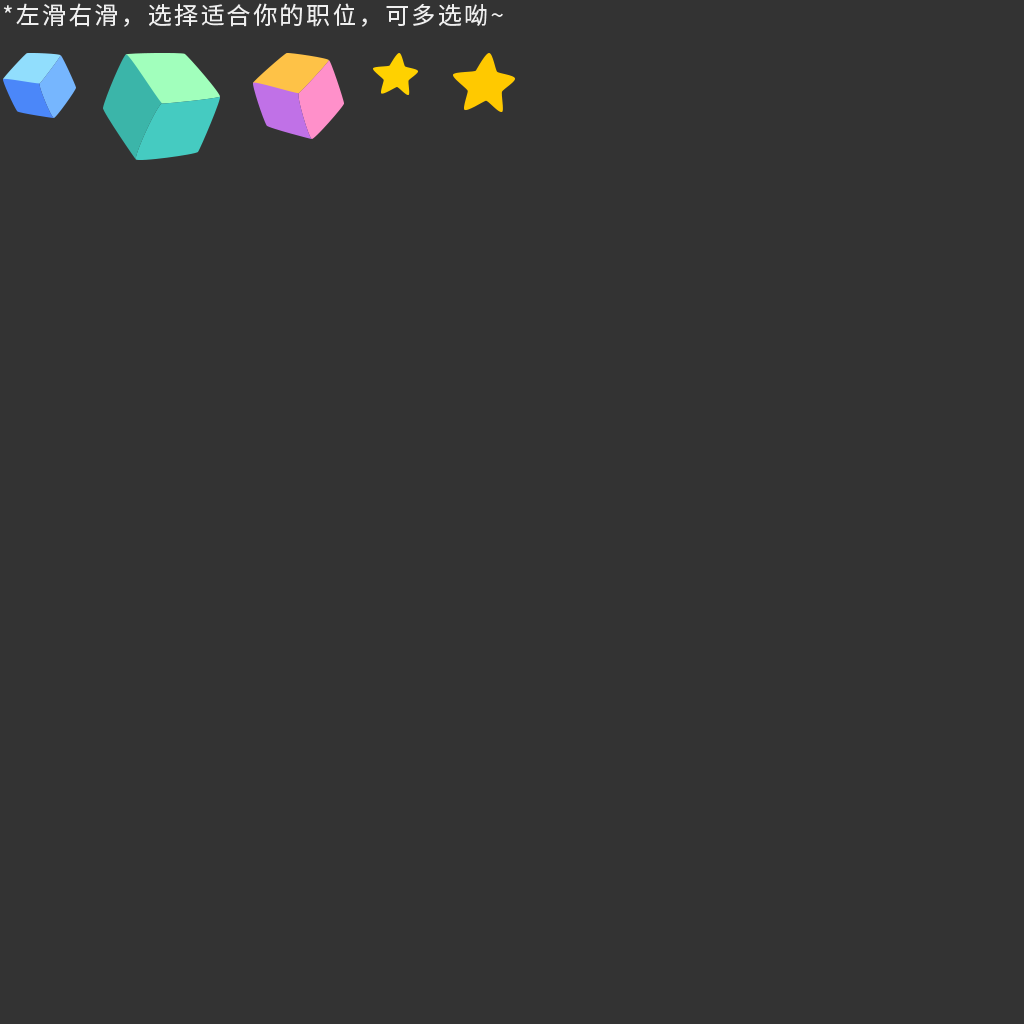
<style>
.page{position:relative;width:1024px;height:1024px;background:#333333}
.page>*{position:absolute;margin:0}
.t1{font:24px "SourceHanSansCN-Regular";letter-spacing:0.1em;color:#efefef;text-transform:uppercase}
</style>
<div class="page">
<p class="t1" style="left:3px;top:3px;width:500px;height:24px">*左滑右滑，选择适合你的职位，可多选呦~</p>
</div>
